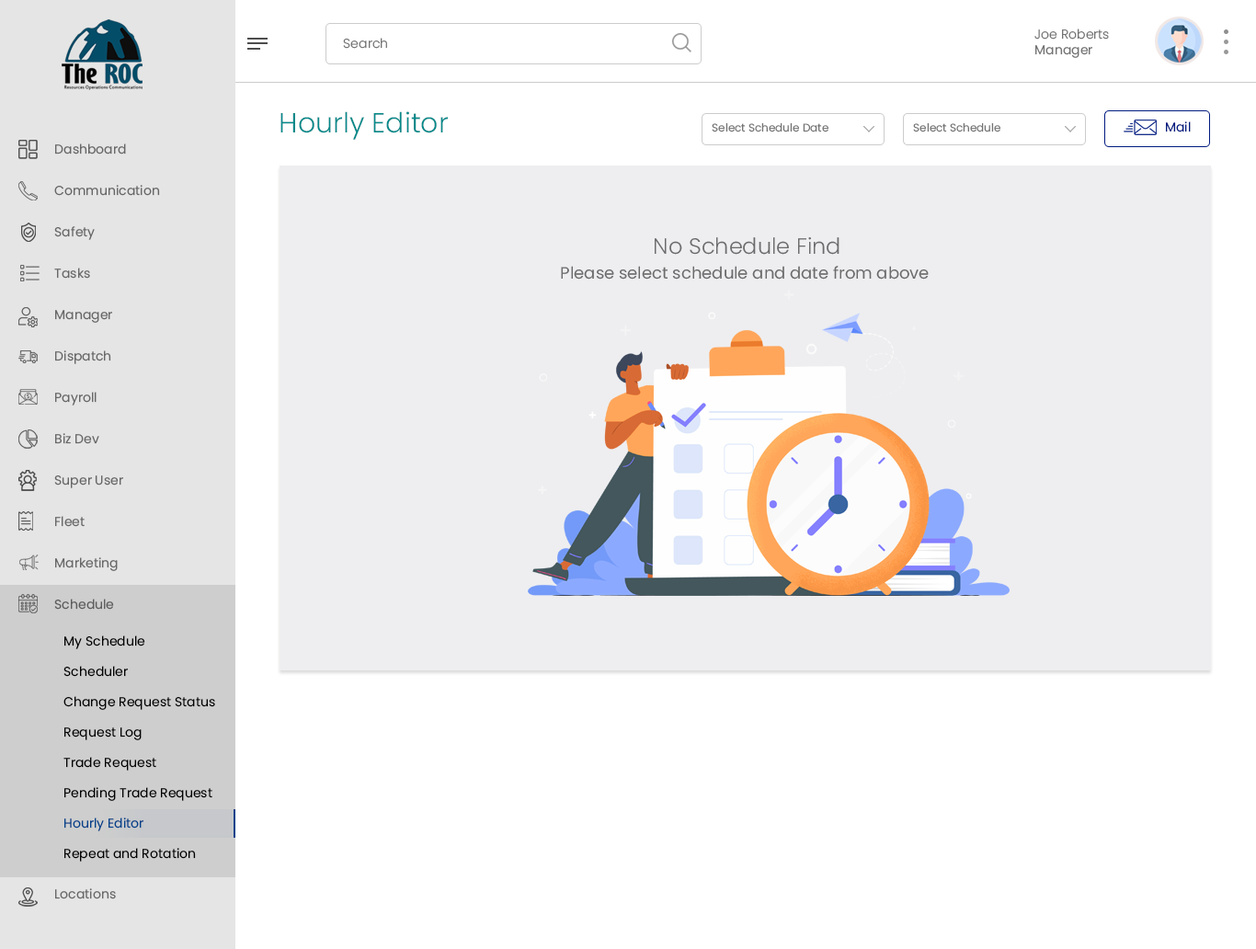
<style>
.page{position:relative;width:1256px;height:949px;background:#ffffff}
.page>*{position:absolute;margin:0}
.t1{font:12.9px "Poppins-Light";color:#737373}
.t2{font:12.9px "Poppins-Regular";color:#737373}
.t3{font:27.6px "Poppins-Light";color:#03898a}
.t4{font:11px "Poppins-Regular";color:#737373}
.t5{font:12.9px "Poppins-Regular";color:#011b80}
.t6{font:12.9px/41.4px "Poppins-Regular";color:#676767}
.t7{font:16.6px/24.8px "Poppins-Regular";color:#6b6b6c}
.t8{font:22.1px/24.8px "Poppins-Light";color:#6b6b6c}
.t9{font:12.9px/30.4px "Poppins-Regular";color:#000000}
.t10{font:12.9px/30.4px "Poppins-Regular";color:#01418a}
</style>
<div class="page">
<p class="t1" style="left:1035px;top:29px;width:74px;height:29px">Joe Roberts<br><span class="t2">Manager</span></p>
<p class="t1" style="left:343px;top:38px;width:44px;height:11px">Search</p>
<p class="t3" style="left:281px;top:111px;width:167px;height:29px">Hourly Editor</p>
<p class="t4" style="left:712px;top:123px;width:117px;height:9px">Select Schedule Date</p>
<p class="t4" style="left:913px;top:123px;width:88px;height:9px">Select Schedule</p>
<p class="t5" style="left:1166px;top:121px;width:25px;height:11px">Mail</p>
<p class="t6" style="left:54px;top:143px;width:106px;height:756px">Dashboard<br>Communication<br>Safety<br>Tasks<br>Manager<br>Dispatch<br>Payroll<br>Biz Dev<br>Super User<br>Fleet<br>Marketing<br>Schedule<br><br><br><br><br><br><br>Locations</p>
<p class="t7" style="left:561px;top:237px;width:368px;height:43px;text-align:center"><span class="t8">No Schedule Find<br></span>Please select schedule and date from above</p>
<p class="t9" style="left:63px;top:636px;width:152px;height:226px">My Schedule<br>Scheduler<br>Change Request Status<br>Request Log<br>Trade Request<br>Pending Trade Request<br><span class="t10">Hourly Editor<br></span>Repeat and Rotation</p>
</div>
